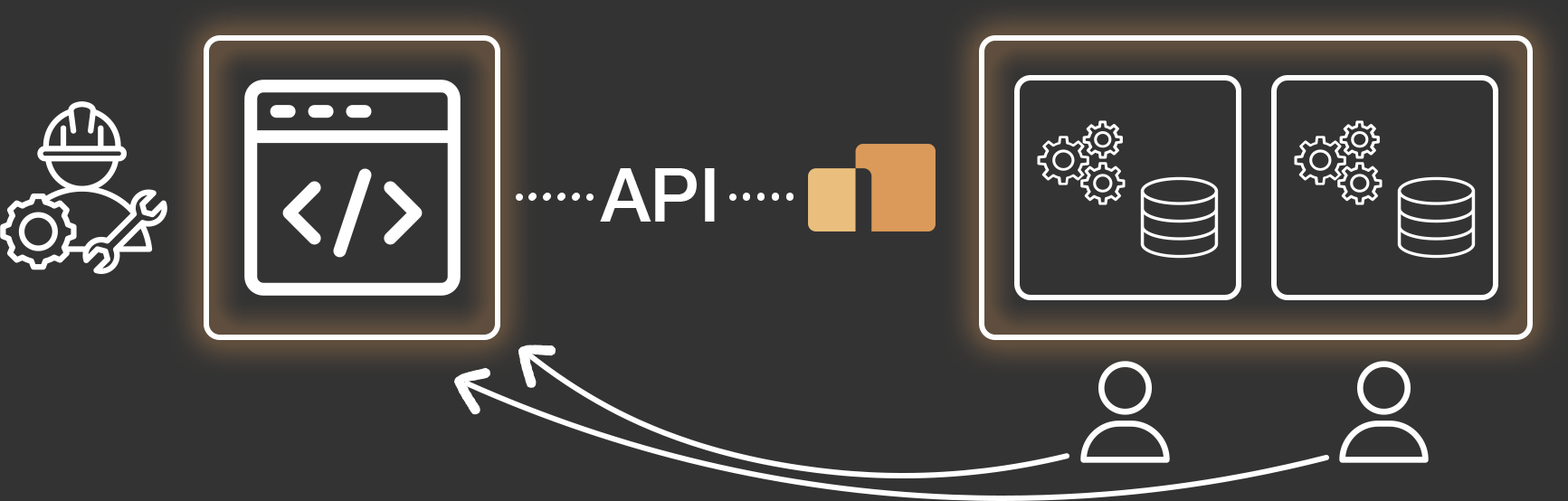
<style>
.page{position:relative;width:1568px;height:501px;background:#333333}
.page>*{position:absolute;margin:0}
.t1{font:74px "HelveticaNeue-Medium";color:#ffffff}
</style>
<div class="page">
<p class="t1" style="left:600px;top:168px;width:115px;height:54px">API</p>
</div>
